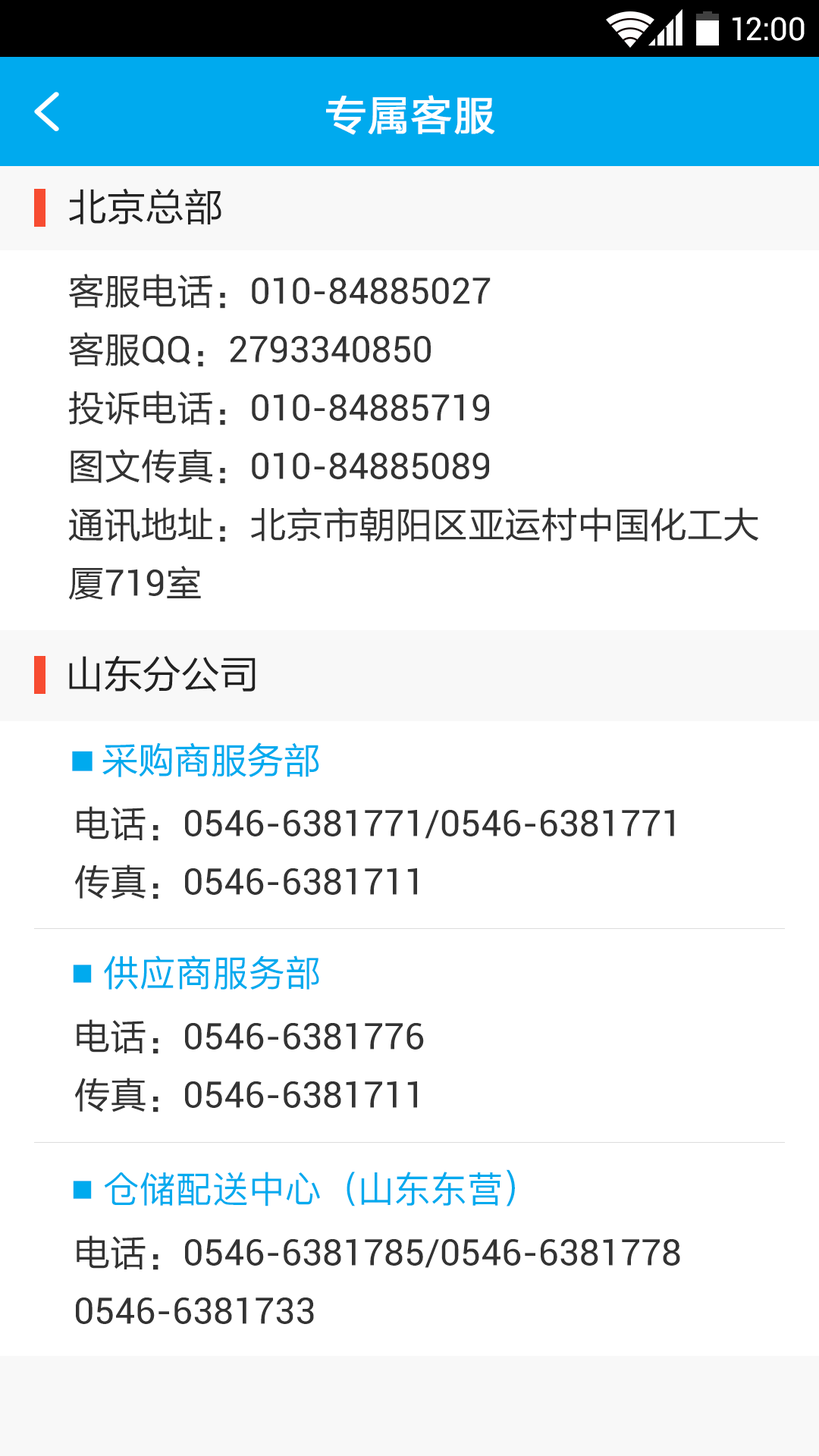
<style>
.page{position:relative;width:819px;height:1456px;background:#ffffff}
.page>*{position:absolute;margin:0}
.t1{font:31.9px "Roboto-Regular";color:#ffffff}
.t2{font:40.9px "FZLTHJW--GB1-0";letter-spacing:0.02em;color:#ffffff;font-weight:bold}
.t3{font:38.7px "FZLTHJW--GB1-0";color:#222222}
.t4{font:36.4px/58.4px "FZLTHJW--GB1-0";color:#333333}
.t5{font:36.4px/58.4px "Roboto-Regular";color:#333333}
.t6{font:36.4px "FZLTHJW--GB1-0";color:#00aaee}
.t7{font:25px "FZLTHJW--GB1-0";color:#00aaee}
.t8{font:36.4px "PingFang-SC-Medium";color:#00aaee}
.t9{font:25px "PingFang-SC-Medium";color:#00aaee}
.t10{font:38.7px "PingFang-SC-Medium";color:#00aaee}
</style>
<div class="page">
<p class="t1" style="left:733px;top:17px;width:72px;height:24px">12:00</p>
<p class="t2" style="left:326px;top:95px;width:168px;height:40px">专属客服</p>
<p class="t3" style="left:69px;top:188px;width:152px;height:36px">北京总部</p>
<p class="t4" style="left:68px;top:274px;width:690px;height:326px">客服电话：<span class="t5">010-84885027<br></span>客服<span class="t5">QQ</span>：<span class="t5">2793340850<br></span>投诉电话：<span class="t5">010-84885719<br></span>图文传真：<span class="t5">010-84885089<br></span>通讯地址：北京市朝阳区亚运村中国化工大厦<span class="t5">719</span>室</p>
<p class="t3" style="left:69px;top:656px;width:187px;height:36px">山东分公司</p>
<p class="t6" style="left:72px;top:742px;width:247px;height:35px"><span class="t7">■ </span>采购商服务部</p>
<p class="t5" style="left:74px;top:806px;width:600px;height:93px"><span class="t4">电话：</span>0546-6381771/0546-6381771 <br><span class="t4">传真：</span>0546-6381711</p>
<p class="t8" style="left:73px;top:955px;width:246px;height:35px"><span class="t9">■ </span>供应商服务部</p>
<p class="t5" style="left:74px;top:1019px;width:350px;height:93px"><span class="t4">电话：</span>0546-6381776 <br><span class="t4">传真：</span>0546-6381711</p>
<p class="t8" style="left:73px;top:1169px;width:442px;height:37px"><span class="t9">■ </span>仓储配送中心（山东东营<span class="t10">）</span></p>
<p class="t5" style="left:76px;top:1235px;width:604px;height:89px"><span class="t4">电话：</span>0546-6381785/0546-6381778<br>0546-6381733</p>
</div>
